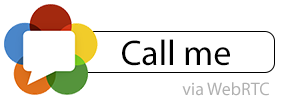
<style>
.page{position:relative;width:300px;height:100px;background:#ffffff}
.page>*{position:absolute;margin:0}
.t1{font:36px "MyriadPro-Regular";color:#000000}
.t2{font:18px "MyriadPro-Regular";color:#b0b0b0}
</style>
<div class="page">
<p class="t1" style="left:122px;top:39px;width:108px;height:27px">Call me</p>
<p class="t2" style="left:182px;top:82px;width:87px;height:14px">via WebRTC</p>
</div>
